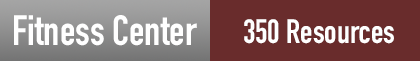
<style>
.page{position:relative;width:420px;height:61px;background:#692c2c}
.page>*{position:absolute;margin:0}
.t1{font:41.7px "DINCondensed-Bold";color:#ffffff}
.t2{font:33.3px "DINCondensed-Bold";color:#ffffff}
</style>
<div class="page">
<p class="t1" style="left:14px;top:15px;width:183px;height:31px">Fitness Center</p>
<p class="t2" style="left:244px;top:19px;width:150px;height:25px">350 Resources</p>
</div>
